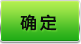
<style>
.page{position:relative;width:81px;height:44px}
.page>*{position:absolute;margin:0}
.t1{font:16px "MicrosoftYaHei";letter-spacing:0.2em;color:#0c0c0c;font-weight:bold}
</style>
<div class="page">
<p class="t1" style="left:20px;top:14px;width:37px;height:17px">确定</p>
</div>
